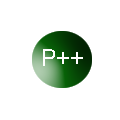
<style>
.page{position:relative;width:120px;height:120px;background:#ffffff}
.page>*{position:absolute;margin:0}
.t1{font:24px "Roboto-Regular";color:#ffffff}
</style>
<div class="page">
<p class="t1" style="left:43px;top:49px;width:40px;height:17px">P++</p>
</div>
